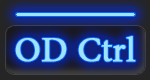
<style>
.page{position:relative;width:150px;height:80px}
.page>*{position:absolute;margin:0}
.t1{font:42.3px "AdobeThai-Regular";color:#9de4fb;font-weight:bold}
</style>
<div class="page">
<p class="t1" style="left:15px;top:36px;width:121px;height:26px">OD Ctrl</p>
</div>
